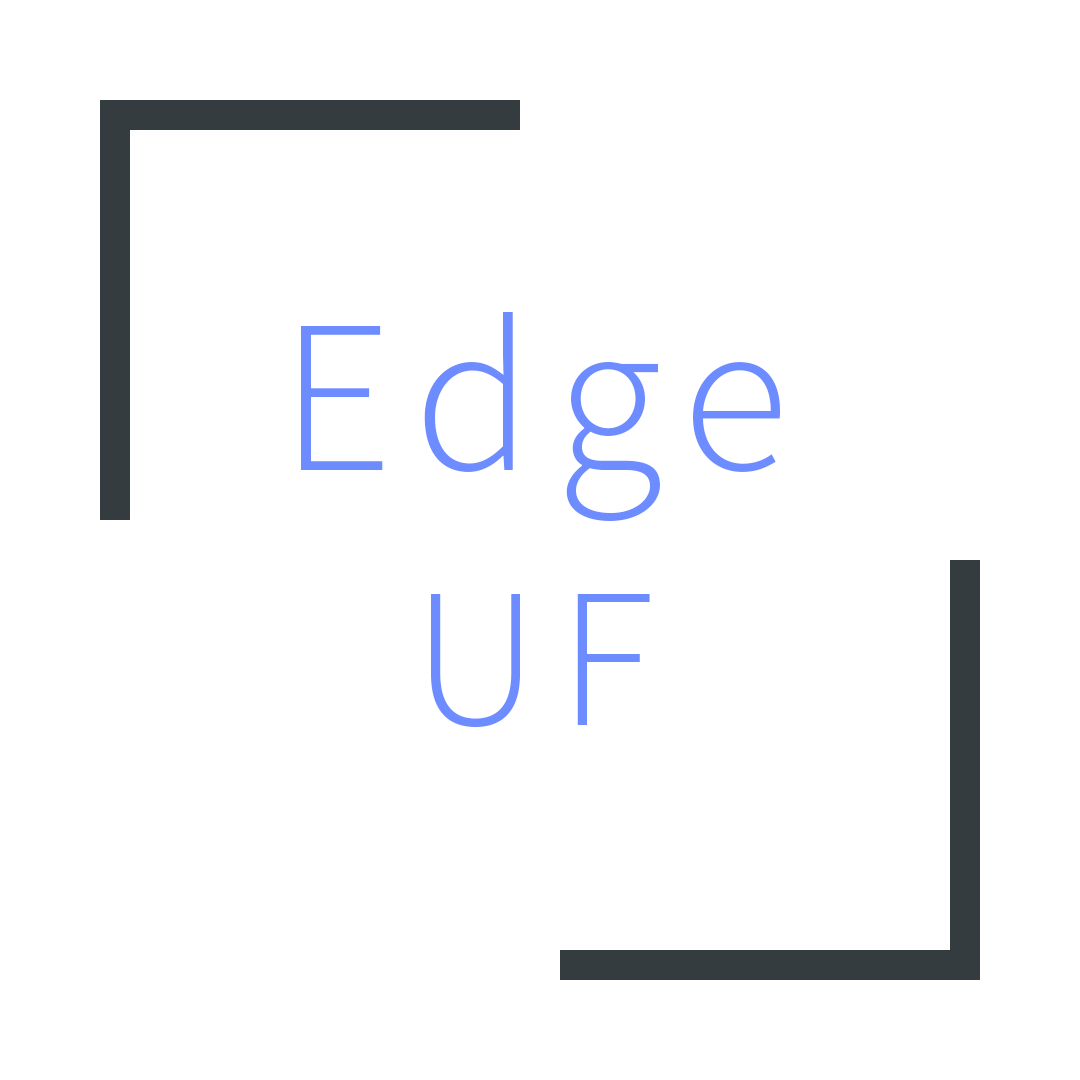
<style>
.page{position:relative;width:1080px;height:1080px;background:#ffffff}
.page>*{position:absolute;margin:0}
.t1{font:220px "SourceSansPro-Light";letter-spacing:0.1em;color:#6d8cff}
.t2{font:200px "SourceSansPro-Light";letter-spacing:0.1em;color:#6d8cff}
</style>
<div class="page">
<p class="t1" style="left:301px;top:312px;width:479px;height:209px">Edge</p>
<p class="t2" style="left:431px;top:594px;width:219px;height:134px">UF</p>
</div>
